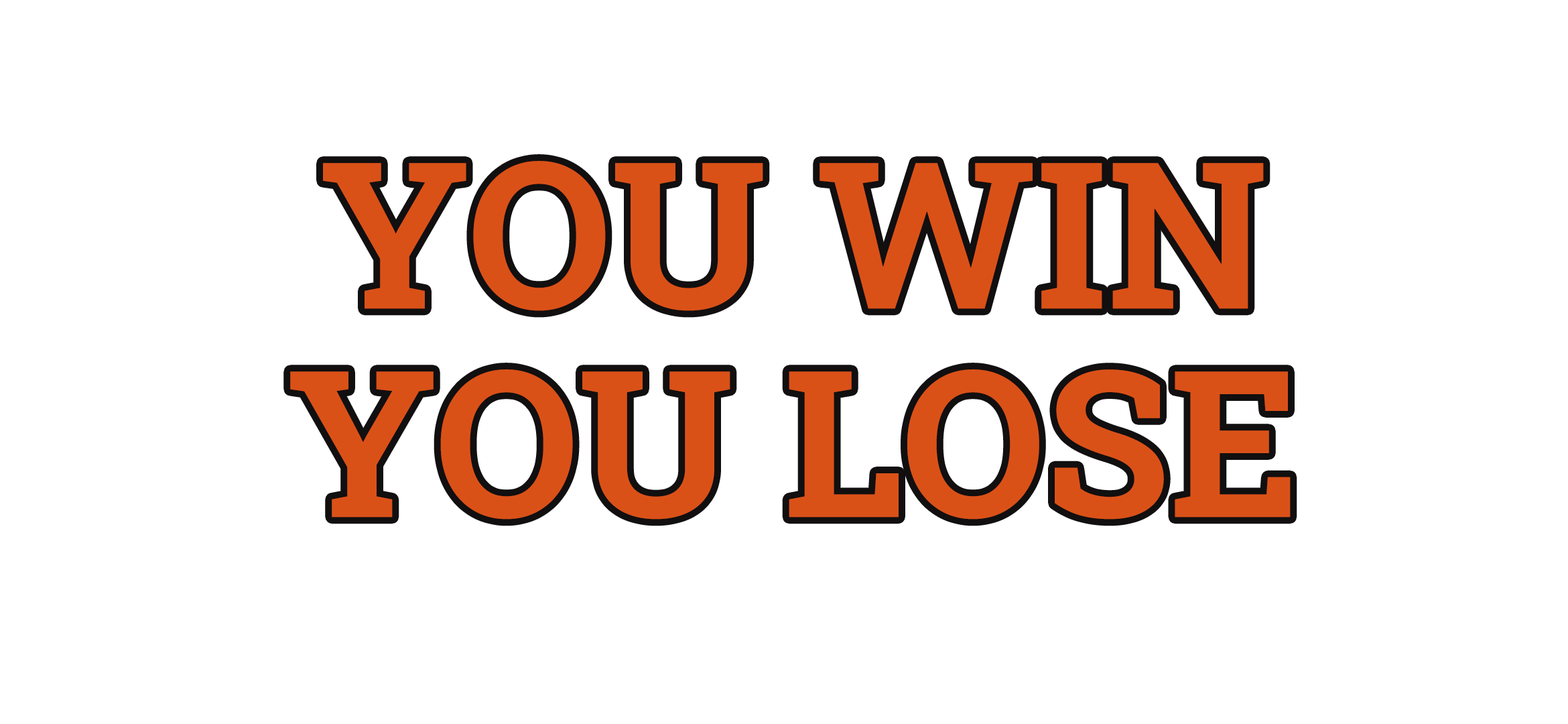
<style>
.page{position:relative;width:1568px;height:724px;background:#ffffff}
.page>*{position:absolute;margin:0}
.t1{font:204.3px "RobotoSlab-Bold";color:#da5118;text-transform:uppercase}
</style>
<div class="page">
<p class="t1" style="left:323px;top:161px;width:941px;height:150px">YOU WIN</p>
<p class="t1" style="left:290px;top:369px;width:1001px;height:150px">YOU lose</p>
</div>
